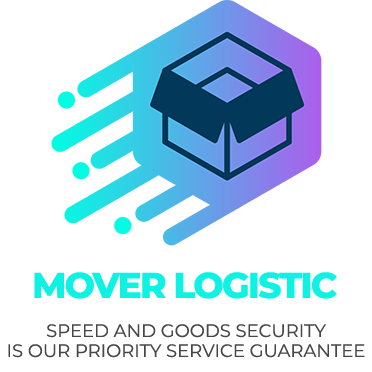
<style>
.page{position:relative;width:372px;height:372px;background:#ffffff}
.page>*{position:absolute;margin:0}
.t1{font:36px "Montserrat-ExtraBold";letter-spacing:-0.05em;color:#0cf3e3}
.t2{font:18px/20px "Montserrat-Regular";color:#474747}
</style>
<div class="page">
<p class="t1" style="left:34px;top:272px;width:303px;height:27px">MOVER LOGISTIC</p>
<p class="t2" style="left:8px;top:324px;width:357px;height:34px;text-align:center">SPEED AND GOODS SECURITY<br>IS OUR PRIORITY SERVICE GUARANTEE</p>
</div>
